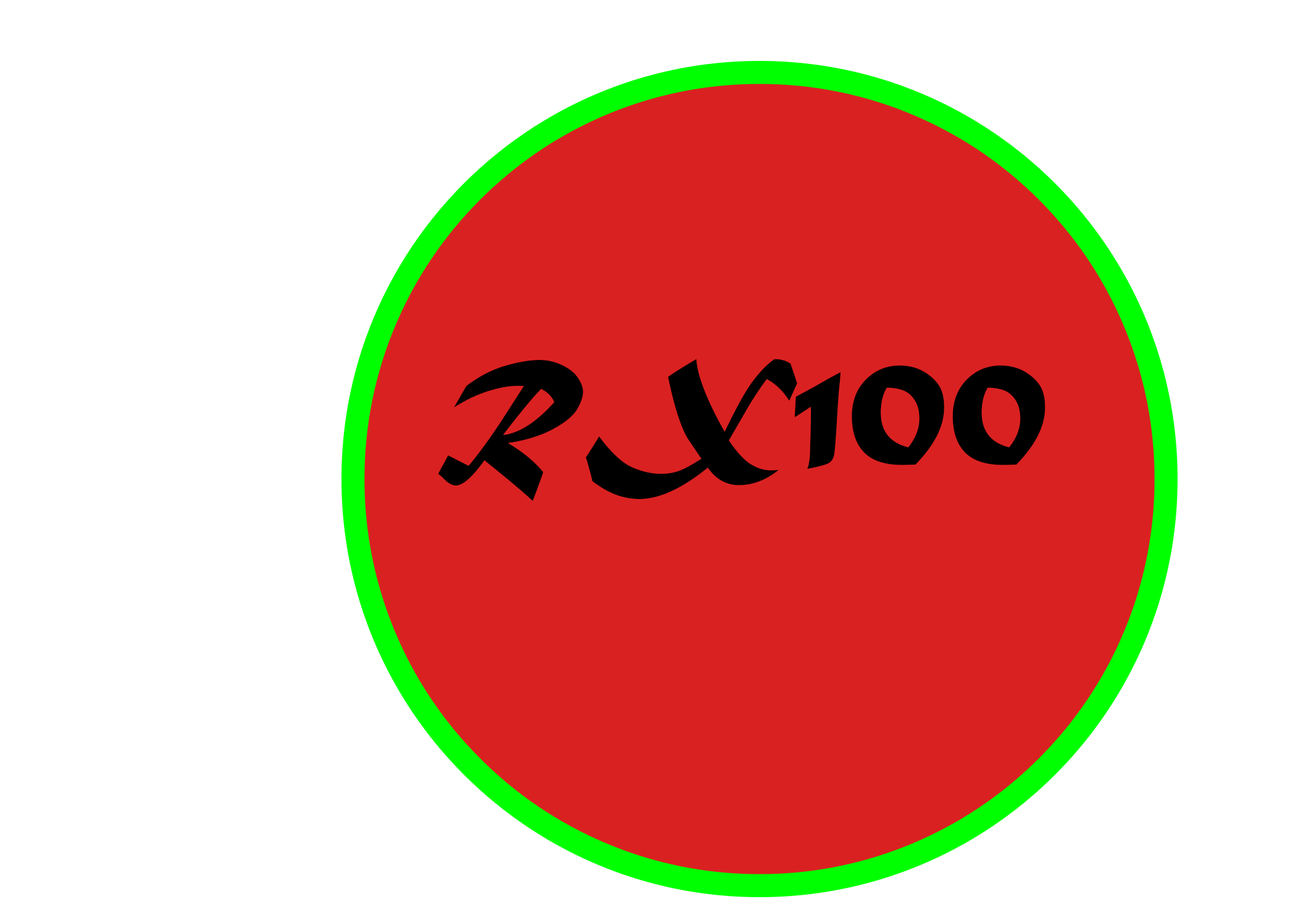
<style>
.page{position:relative;width:1292px;height:923px;background:#ffffff}
.page>*{position:absolute;margin:0}
.t1{font:153.8px "MaturaMTScriptCapitals";color:#000000}
</style>
<div class="page">
<p class="t1" style="left:438px;top:359px;width:607px;height:142px">RX100</p>
</div>
